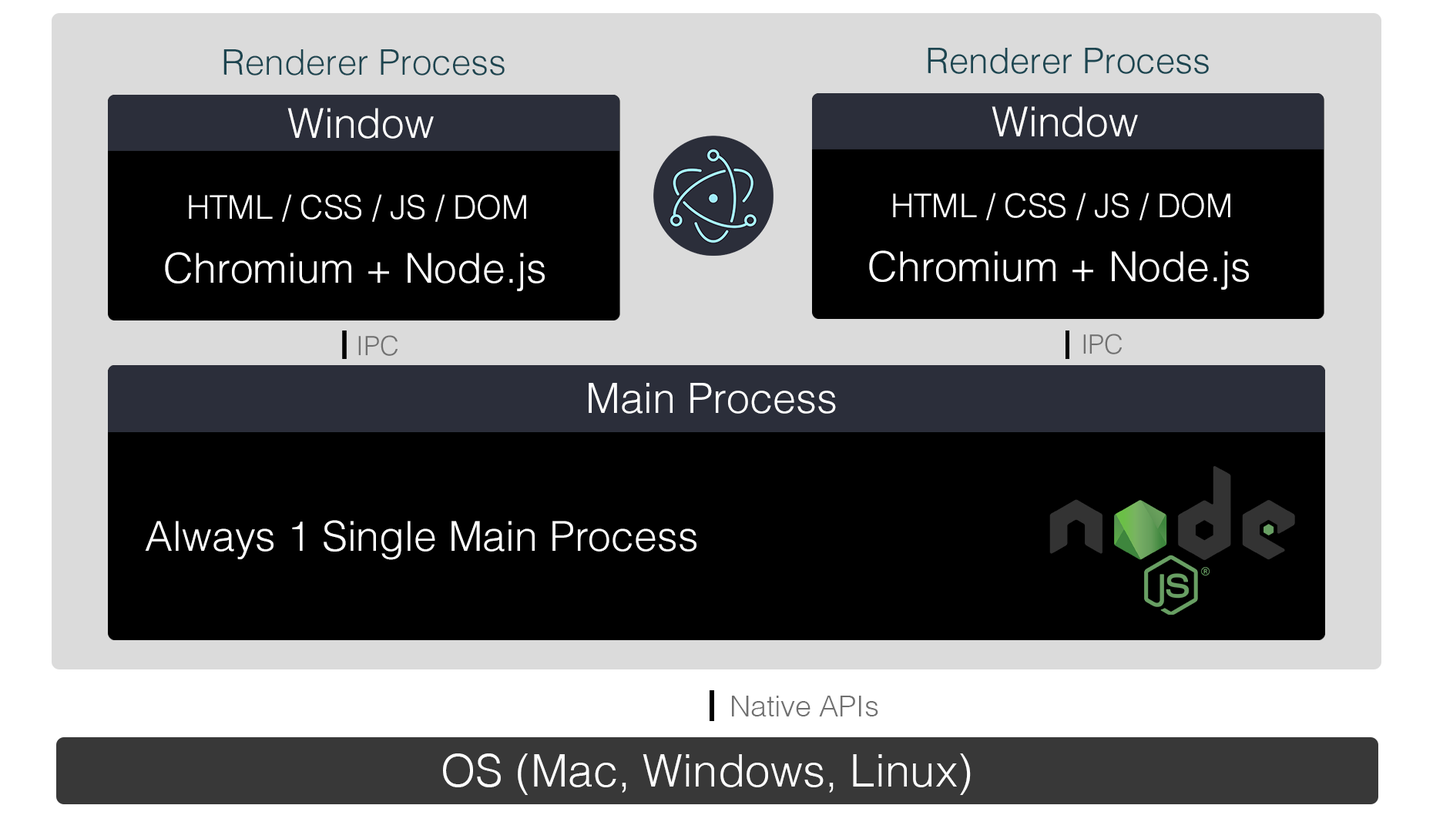
<style>
.page{position:relative;width:1433px;height:832px;background:#000000}
.page>*{position:absolute;margin:0}
.t1{font:35.4px "Helvetica-Light";color:#1d4550}
.t2{font:41.3px "Helvetica-Light";color:#ffffff}
.t3{font:32.5px "Helvetica-Light";color:#ffffff}
.t4{font:26.6px "Helvetica-Light";color:#707070}
.t5{font:41.6px "Helvetica-Light";color:#ffffff}
.t6{font:28.9px "Helvetica-Light";color:#707070}
.t7{font:44.9px "Helvetica-Light";color:#ffffff}
</style>
<div class="page">
<p class="t1" style="left:223px;top:49px;width:282px;height:27px">Renderer Process</p>
<p class="t2" style="left:287px;top:108px;width:147px;height:31px">Window</p>
<p class="t3" style="left:189px;top:194px;width:337px;height:28px">HTML / CSS / JS / DOM</p>
<p class="t2" style="left:165px;top:252px;width:380px;height:39px">Chromium + Node.js</p>
<p class="t4" style="left:358px;top:335px;width:40px;height:21px">IPC</p>
<p class="t4" style="left:1083px;top:334px;width:39px;height:20px">IPC</p>
<p class="t5" style="left:589px;top:383px;width:247px;height:31px">Main Process</p>
<p class="t2" style="left:145px;top:520px;width:551px;height:40px">Always 1 Single Main Process</p>
<p class="t6" style="left:732px;top:696px;width:146px;height:21px">Native APIs</p>
<p class="t7" style="left:443px;top:754px;width:528px;height:41px">OS (Mac, Windows, Linux)</p>
</div>
